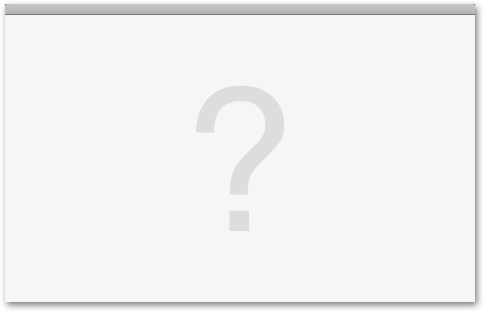
<style>
.page{position:relative;width:484px;height:312px;background:#f6f6f6}
.page>*{position:absolute;margin:0}
.t1{font:200px "Helvetica";letter-spacing:-0.01em;color:#dedddd}
</style>
<div class="page">
<p class="t1" style="left:196px;top:85px;width:88px;height:146px">?</p>
</div>
